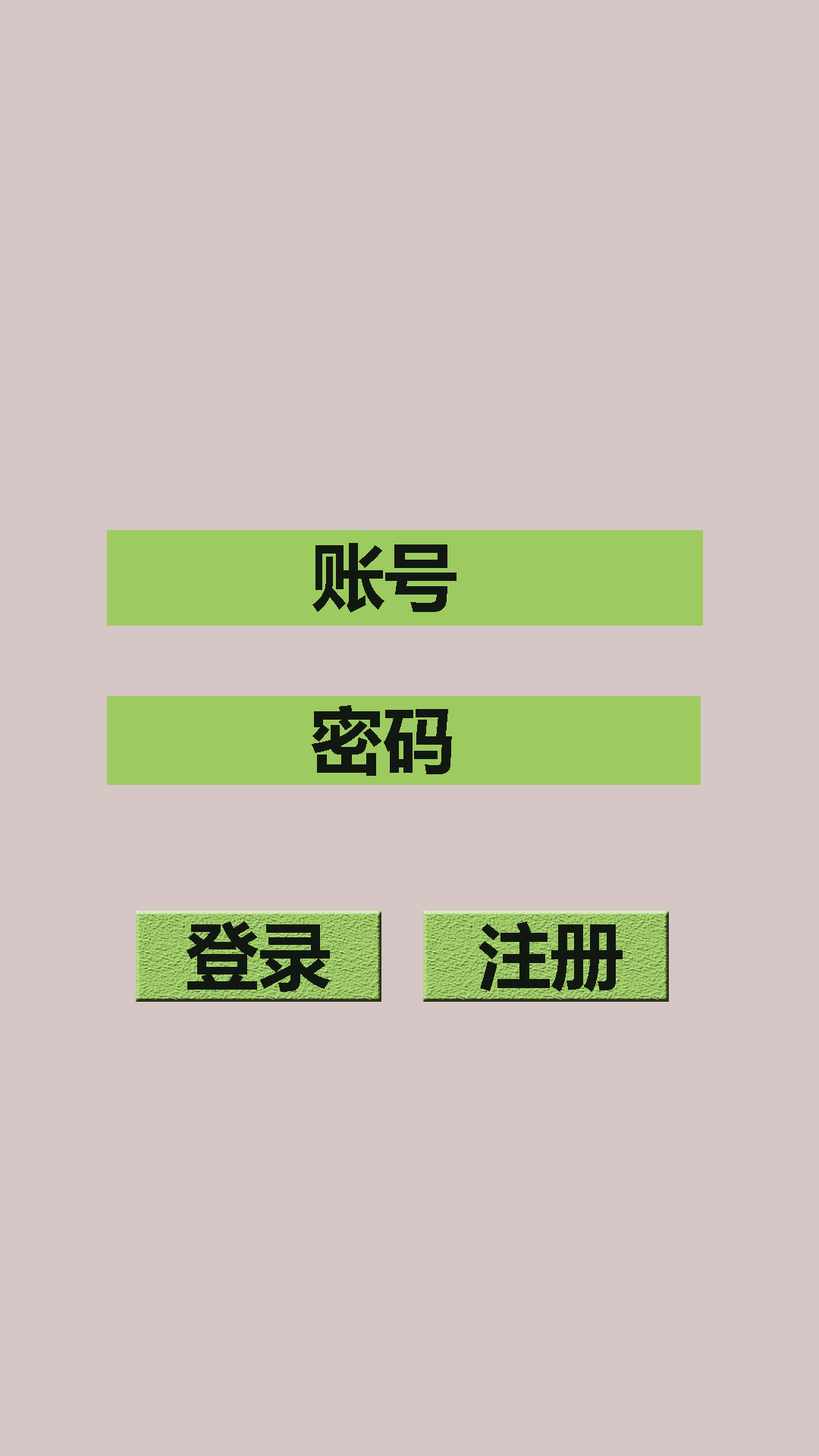
<style>
.page{position:relative;width:819px;height:1456px;background:#d6c6c6}
.page>*{position:absolute;margin:0}
.t1{font:72.8px "MicrosoftYaHei-Bold";color:#111811}
</style>
<div class="page">
<p class="t1" style="left:312px;top:543px;width:145px;height:70px">账号</p>
<p class="t1" style="left:312px;top:705px;width:140px;height:71px">密码</p>
<p class="t1" style="left:187px;top:921px;width:143px;height:71px">登录</p>
<p class="t1" style="left:479px;top:921px;width:144px;height:71px">注册</p>
</div>
